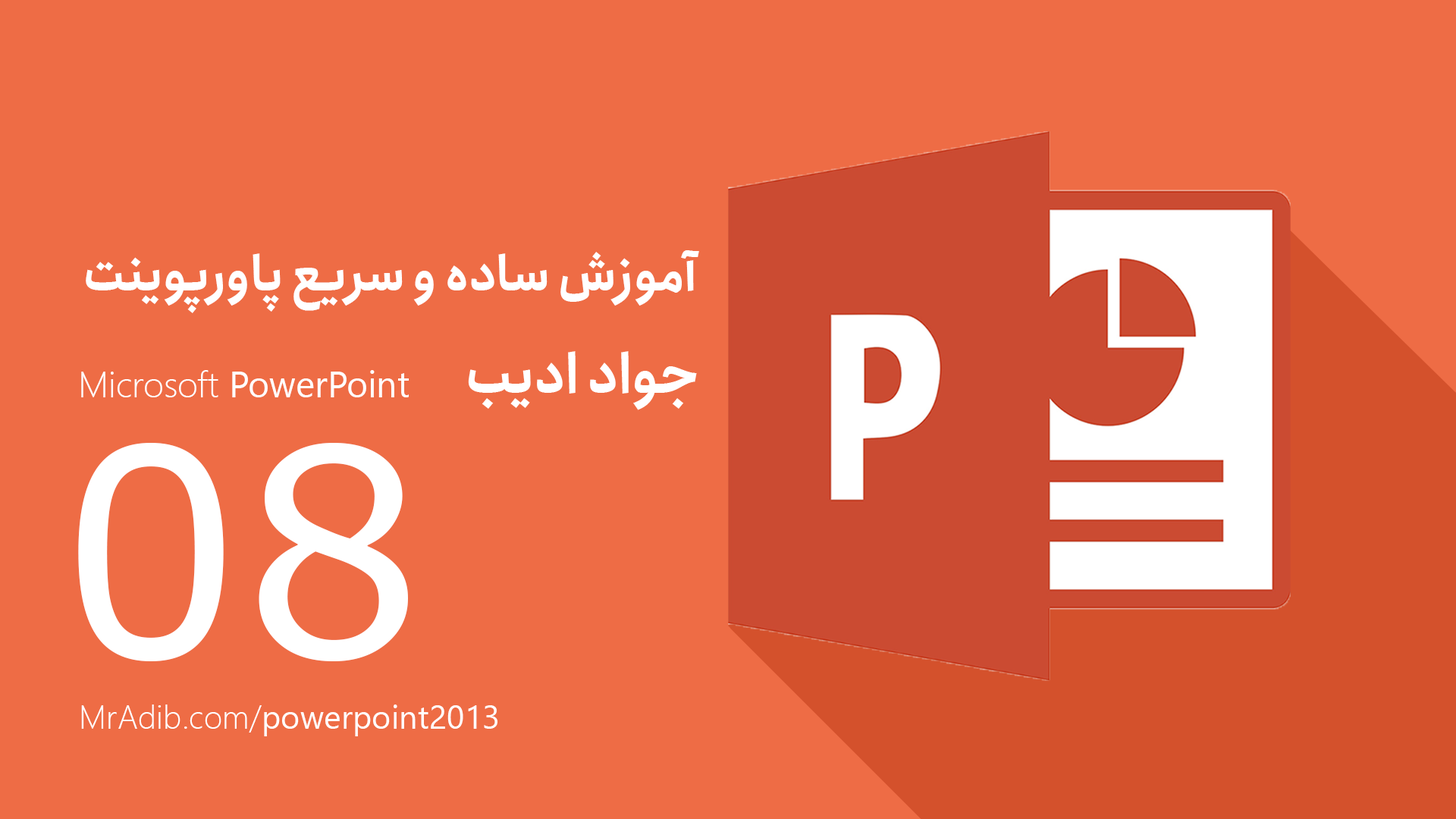
<style>
.page{position:relative;width:1456px;height:819px;background:#ee6c45}
.page>*{position:absolute;margin:0}
.t1{font:48.5px "Anjoman-Bold";color:#ffffff}
.t2{font:54.6px "Anjoman-Bold";color:#ffffff}
.t3{font:36.4px "SegoeUI";color:#ffffff}
.t4{font:36.4px "SegoeUI-Light";color:#ffffff}
.t5{font:288.2px "Verdana";color:#ffffff}
.t6{font:33px "SegoeUI";color:#ffffff}
.t7{font:33px "SegoeUI-Light";color:#ffffff}
</style>
<div class="page">
<p class="t1" style="left:86px;top:250px;width:613px;height:63px">آموزش ساده و سریع پاورپوینت</p>
<p class="t2" style="left:468px;top:351px;width:229px;height:59px">جواد ادیب</p>
<p class="t3" style="left:81px;top:370px;width:328px;height:27px"><span class="t4">Microsoft </span>PowerPoint</p>
<p class="t5" style="left:78px;top:443px;width:330px;height:218px">08</p>
<p class="t6" style="left:81px;top:704px;width:416px;height:32px"><span class="t7">MrAdib.com/</span>powerpoint2013</p>
</div>
